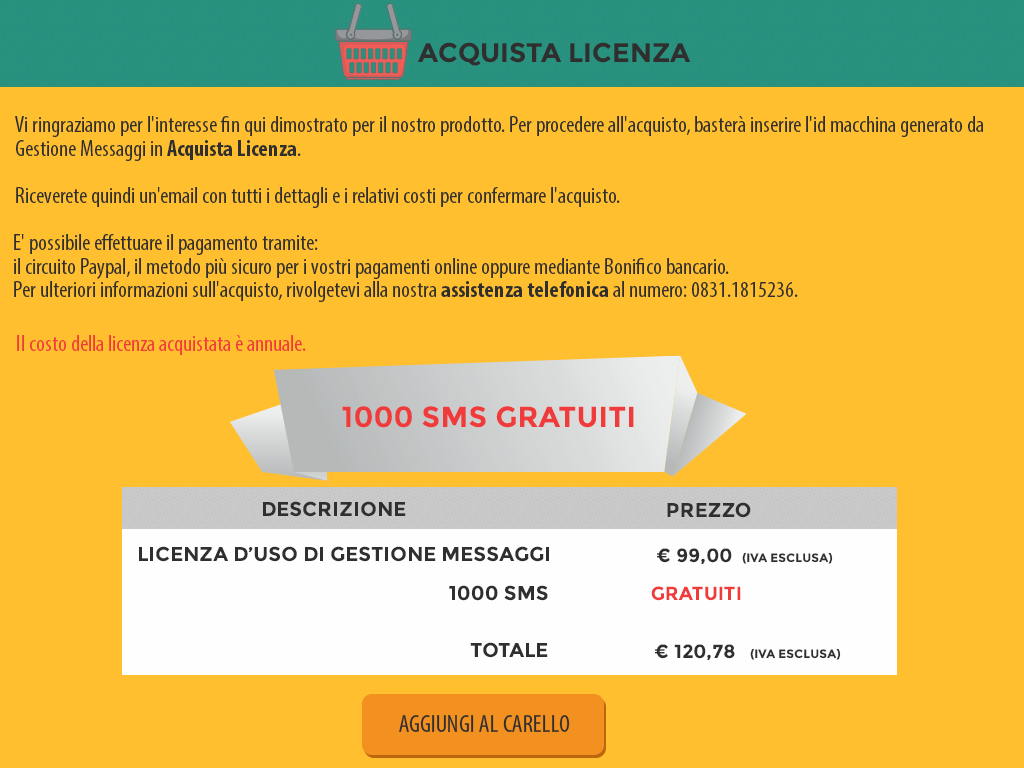
<style>
.page{position:relative;width:1024px;height:768px;background:#ffbf2e}
.page>*{position:absolute;margin:0}
.t1{font:27px "Montserrat-Bold";color:#2f2f2f}
.t2{font:23px/23.7px "MyriadPro-Cond";color:#2f2f2f}
.t3{font:23px/23.7px "MyriadPro-BoldCond";color:#2f2f2f}
.t4{font:23px "MyriadPro-Cond";color:#f03b3b}
.t5{font:29px "Montserrat-Bold";color:#f03b3b}
.t6{font:20px "Montserrat-Bold";color:#2f2f2f}
.t7{font:12px "Montserrat-Bold";color:#2f2f2f}
.t8{font:19px "Montserrat-Bold";color:#2f2f2f}
.t9{font:19px "Montserrat-Bold";color:#f03b3b}
.t10{font:25px "MyriadPro-Cond";color:#2f2f2f}
</style>
<div class="page">
<p class="t1" style="left:417px;top:42px;width:274px;height:24px">ACQUISTA LICENZA</p>
<p class="t2" style="left:15px;top:116px;width:968px;height:92px">Vi ringraziamo per l'interesse fin qui dimostrato per il nostro prodotto. Per procedere all'acquisto, basterà inserire l'id macchina generato da<br>Gestione Messaggi in <span class="t3">Acquista Licenza</span>.<br><br>Riceverete quindi un'email con tutti i dettagli e i relativi costi per confermare l'acquisto.</p>
<p class="t2" style="left:14px;top:234px;width:784px;height:68px">E' possibile effettuare il pagamento tramite:<br>il circuito Paypal, il metodo più sicuro per i vostri pagamenti online oppure mediante Bonifico bancario.<br>Per ulteriori informazioni sull'acquisto, rivolgetevi alla nostra <span class="t3">assistenza telefonica</span> al numero: 0831.1815236.</p>
<p class="t4" style="left:17px;top:335px;width:289px;height:20px">Il costo della licenza acquistata è annuale.</p>
<p class="t5" style="left:342px;top:406px;width:292px;height:22px">1000 SMS GRATUITI</p>
<p class="t6" style="left:263px;top:501px;width:143px;height:16px">DESCRIZIONE</p>
<p class="t6" style="left:667px;top:502px;width:84px;height:16px">PREZZO</p>
<p class="t6" style="left:139px;top:546px;width:410px;height:16px">LICENZA D’USO DI GESTIONE MESSAGGI</p>
<p class="t7" style="left:657px;top:548px;width:176px;height:16px"><span class="t8">€ 99,00  </span>(IVA ESCLUSA)</p>
<p class="t6" style="left:449px;top:585px;width:99px;height:16px">1000 SMS</p>
<p class="t9" style="left:651px;top:586px;width:90px;height:15px">GRATUITI</p>
<p class="t6" style="left:470px;top:642px;width:78px;height:16px">TOTALE</p>
<p class="t7" style="left:655px;top:644px;width:186px;height:16px"><span class="t8">€ 120,78   </span>(IVA ESCLUSA)</p>
<p class="t10" style="left:399px;top:715px;width:171px;height:17px">AGGIUNGI AL CARELLO</p>
</div>
